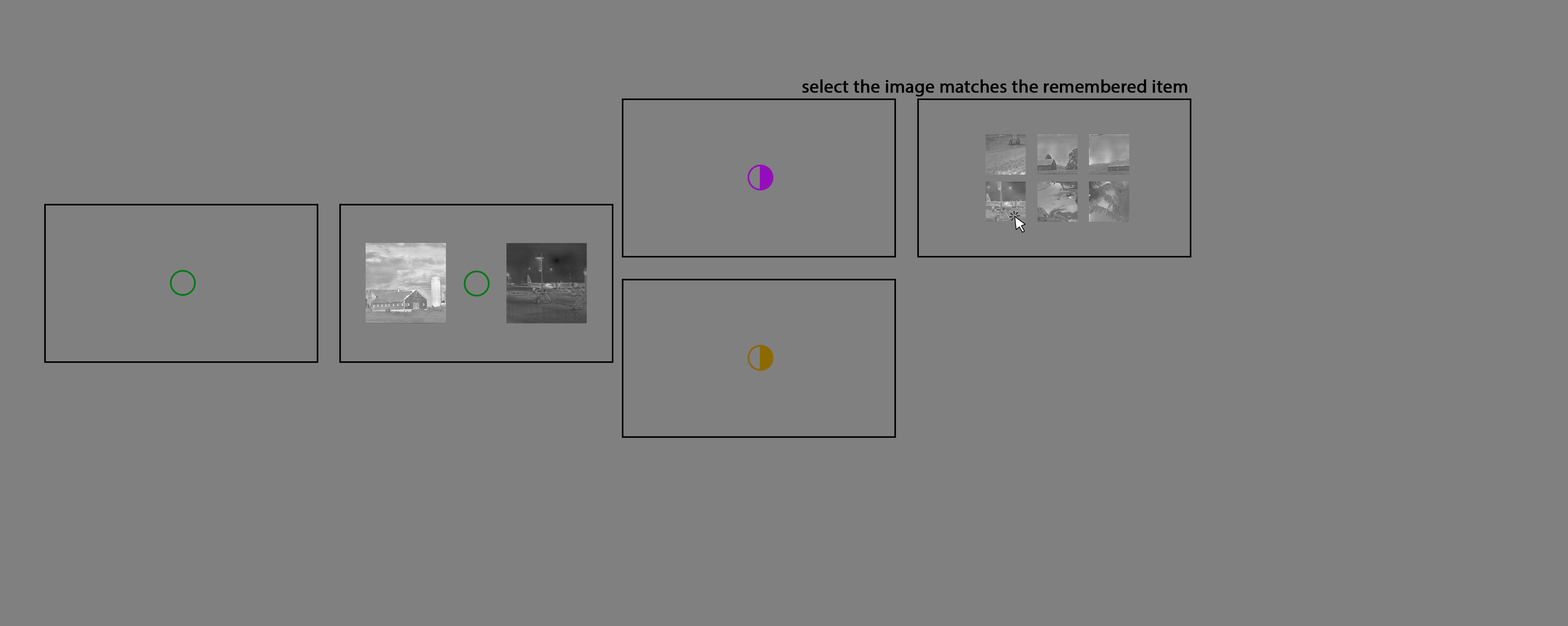
<style>
.page{position:relative;width:1568px;height:626px;background:#808080}
.page>*{position:absolute;margin:0}
.t1{font:18.3px "MyriadPro-Regular";color:#000000;font-weight:bold}
</style>
<div class="page">
<p class="t1" style="left:802px;top:79px;width:385px;height:18px">select the image matches the remembered item</p>
</div>
